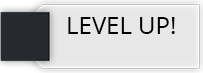
<style>
.page{position:relative;width:203px;height:73px;background:#e7e7e7}
.page>*{position:absolute;margin:0}
.t1{font:24px "OpenSans";color:#000000}
</style>
<div class="page">
<p class="t1" style="left:68px;top:17px;width:107px;height:17px">LEVEL UP!</p>
</div>
